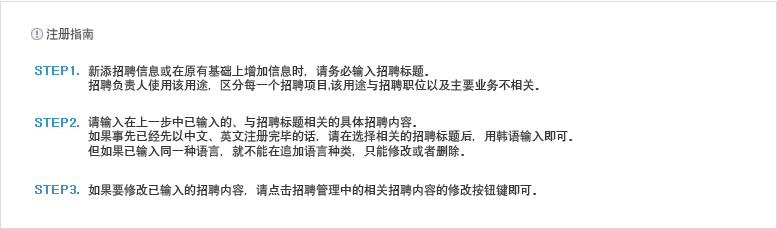
<style>
.page{position:relative;width:777px;height:229px;background:#ffffff}
.page>*{position:absolute;margin:0}
.t1{font:12px "SIL-Hei-Med-Jian";color:#545454}
.t2{font:12px "SIL-Hei-Med-Jian";color:#373737}
</style>
<div class="page">
<p class="t1" style="left:46px;top:28px;width:48px;height:12px">注册指南</p>
<p class="t2" style="left:88px;top:65px;width:451px;height:26px">新添招聘信息或在原有基础上增加信息时，请务必输入招聘标题。<br>招聘负责人使用该用途，区分每一个招聘项目,该用途与招聘职位以及主要业务不相关。</p>
<p class="t2" style="left:88px;top:116px;width:485px;height:41px">请输入在上一步中已输入的、与招聘标题相关的具体招聘内容。<br>如果事先已经先以中文、英文注册完毕的话，请在选择相关的招聘标题后，用韩语输入即可。<br>但如果已输入同一种语言，就不能在追加语言种类，只能修改或者删除。</p>
<p class="t2" style="left:88px;top:184px;width:449px;height:12px">如果要修改已输入的招聘内容，请点击招聘管理中的相关招聘内容的修改按钮键即可。</p>
</div>
